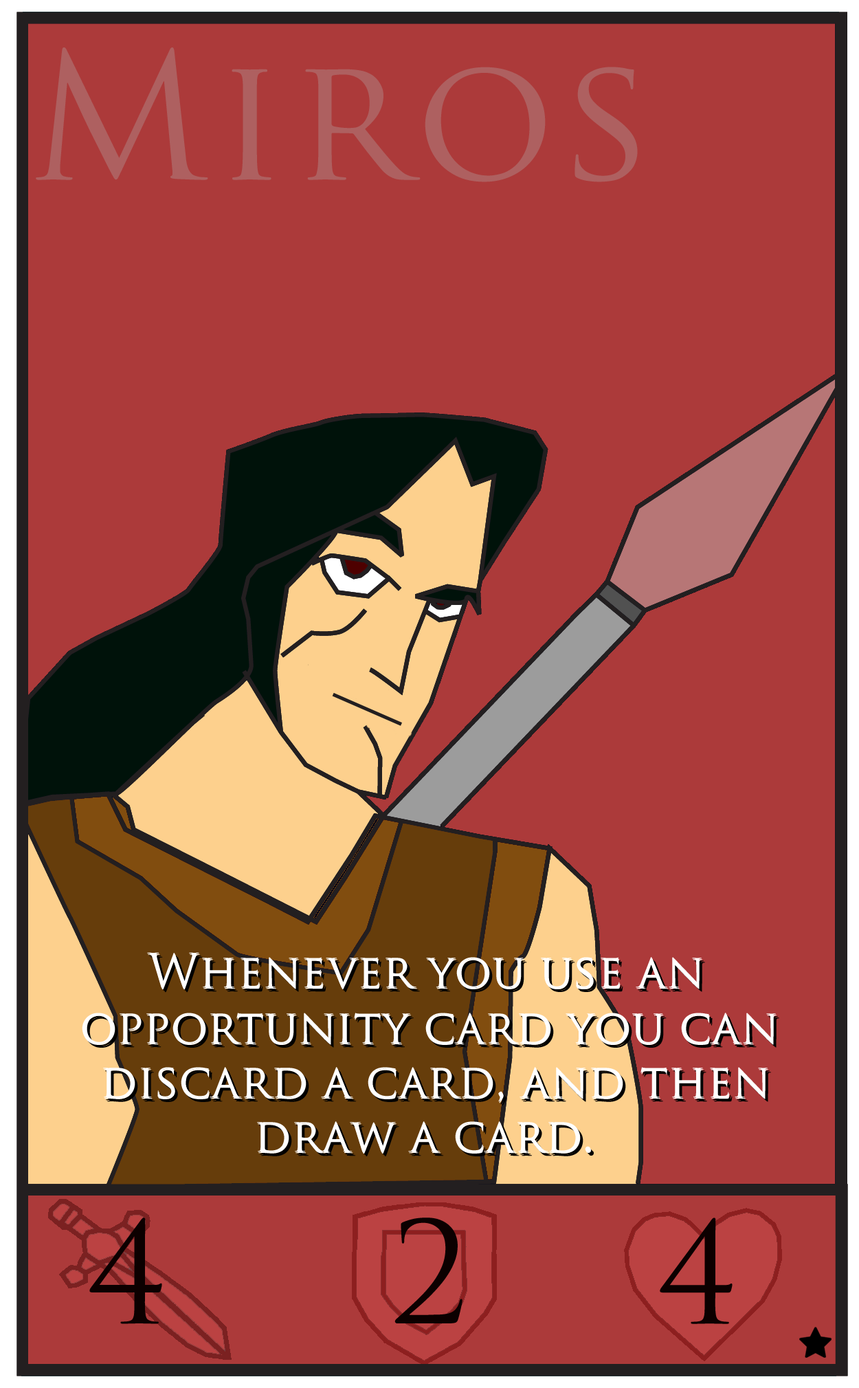
<style>
.page{position:relative;width:859px;height:1388px;background:#ac3a3a}
.page>*{position:absolute;margin:0}
.t1{font:45.8px "TrajanPro-Regular";color:#ffffff}
.t2{font:51.6px "TrajanPro-Regular";color:#0c535b}
</style>
<div class="page">
<p class="t1" style="left:147px;top:952px;width:555px;height:36px">Whenever you use an</p>
<p class="t1" style="left:148px;top:953px;width:554px;height:37px">Whenever you use an</p>
<p class="t1" style="left:82px;top:1013px;width:694px;height:30px">opportunity card you can</p>
<p class="t1" style="left:82px;top:1014px;width:695px;height:31px">opportunity card you can</p>
<p class="t1" style="left:103px;top:1067px;width:665px;height:35px">discard a card, and then</p>
<p class="t1" style="left:104px;top:1068px;width:664px;height:35px">discard a card, and then</p>
<p class="t1" style="left:257px;top:1121px;width:333px;height:31px"><span class="t2"> </span>draw a card.</p>
<p class="t1" style="left:258px;top:1122px;width:333px;height:31px"><span class="t2"> </span>draw a card.</p>
</div>
